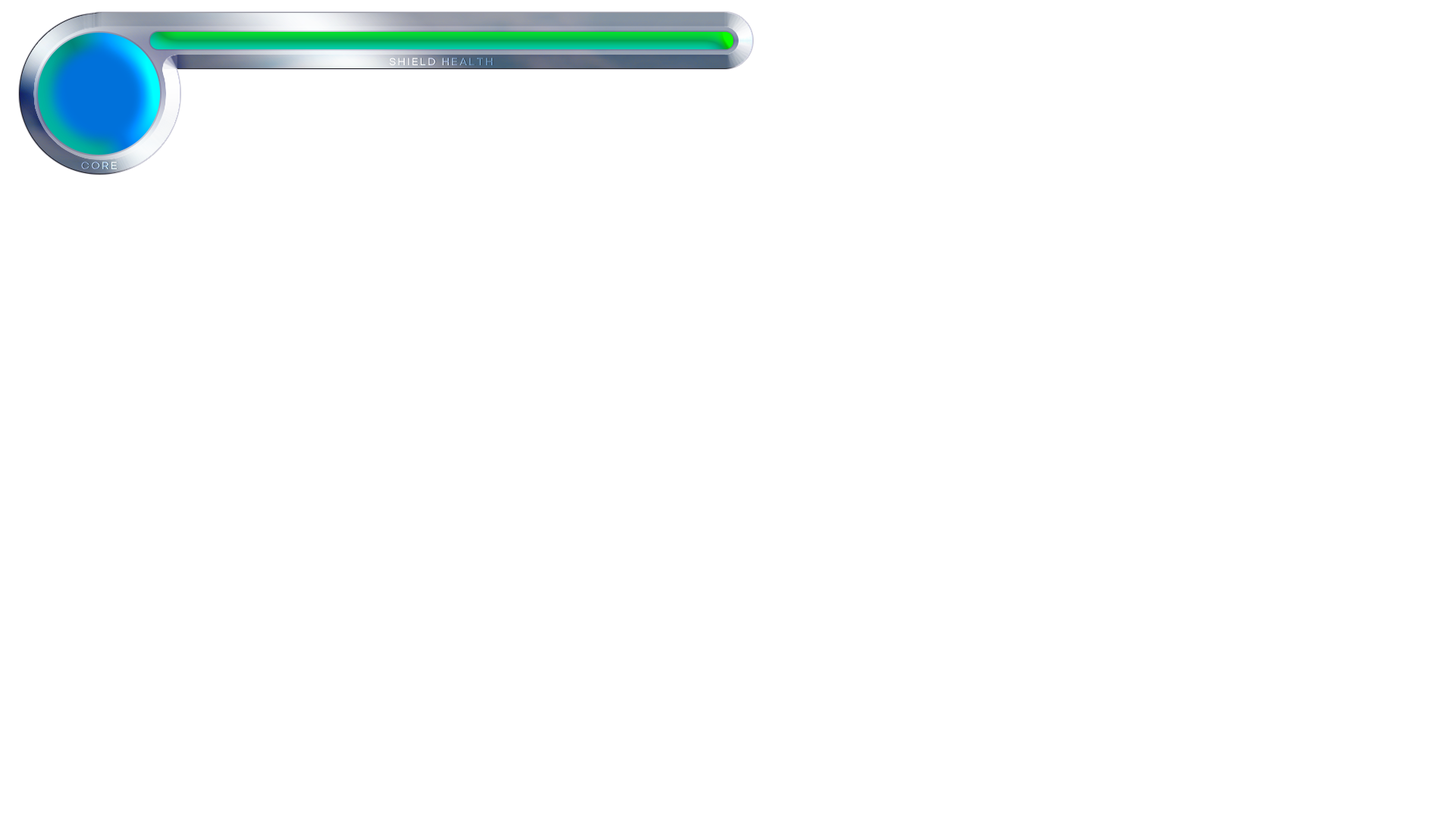
<style>
.page{position:relative;width:1456px;height:819px;background:#ffffff}
.page>*{position:absolute;margin:0}
.t1{font:9.1px "GmarketSansTTFMedium";letter-spacing:0.2em}
</style>
<div class="page">
<p class="t1" style="left:389px;top:58px;width:104px;height:7px">SHIELD HEALTH</p>
<p class="t1" style="left:81px;top:162px;width:36px;height:7px">CORE</p>
</div>
